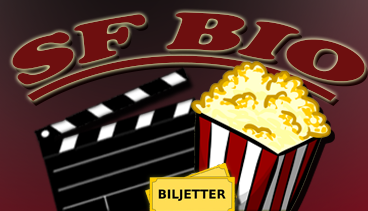
<style>
.page{position:relative;width:368px;height:211px}
.page>*{position:absolute;margin:0}
.t1{font:55px "CooperBlack";color:#851122;font-style:italic;text-decoration:underline;scale:1.32 1}
</style>
<div class="page">
<p class="t1" style="left:12px;top:12px;width:353px;height:89px">SF BIO</p>
</div>
